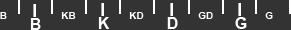
<style>
.page{position:relative;width:291px;height:30px;background:#333333}
.page>*{position:absolute;margin:0}
.t1{font:10px "Arial-BoldMT";color:#ffffff}
.t2{font:16px "Arial-BoldMT";color:#ffffff}
</style>
<div class="page">
<p class="t1" style="left:0px;top:12px;width:7px;height:7px">B</p>
<p class="t1" style="left:61px;top:12px;width:15px;height:7px">KB</p>
<p class="t2" style="left:98px;top:17px;width:12px;height:12px">K</p>
<p class="t1" style="left:129px;top:12px;width:15px;height:7px">KD</p>
<p class="t2" style="left:167px;top:17px;width:11px;height:12px">D</p>
<p class="t1" style="left:198px;top:12px;width:15px;height:7px">GD</p>
<p class="t2" style="left:235px;top:17px;width:12px;height:12px">G</p>
<p class="t1" style="left:265px;top:12px;width:8px;height:7px">G</p>
<p class="t2" style="left:30px;top:18px;width:11px;height:12px">B</p>
</div>
